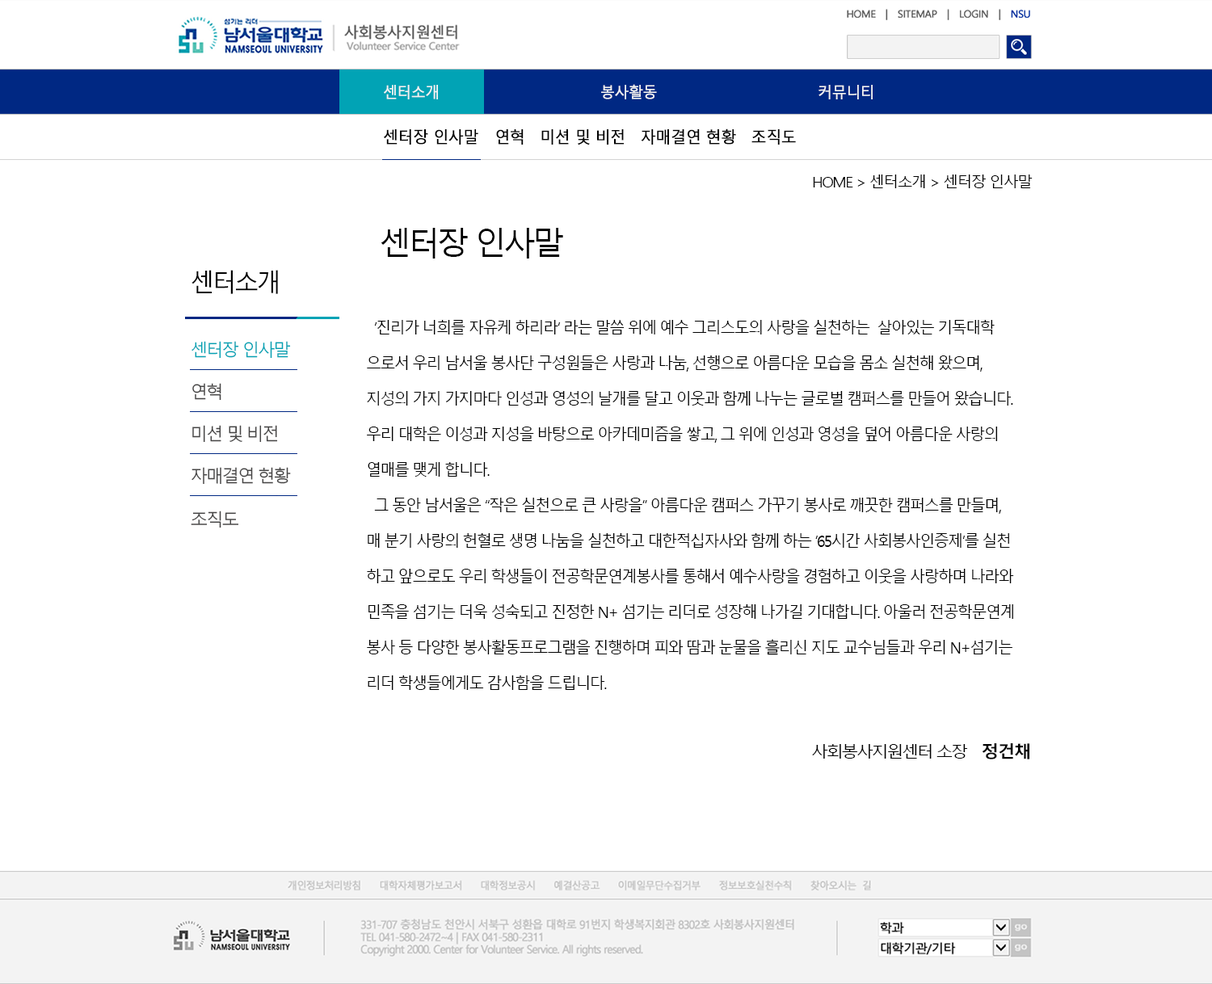
<style>
.page{position:relative;width:1212px;height:984px;background:#ffffff}
.page>*{position:absolute;margin:0}
.t1{font:15.1px "MalgunGothicRegular";letter-spacing:-0.05em;color:#f3f3f3;font-weight:bold;scale:0.95 1}
.t2{font:16.2px "MalgunGothicRegular";letter-spacing:-0.05em;color:#000000;font-weight:bold;scale:0.95 1}
.t3{font:14.9px "MalgunGothicRegular";letter-spacing:-0.1em;color:#000000;scale:1.05 1}
.t4{font:32.3px "MalgunGothicRegular";letter-spacing:-0.1em;color:#000000}
.t5{font:25.1px "MalgunGothicRegular";letter-spacing:-0.1em;color:#000000}
.t6{font:16.5px/35.5px "MalgunGothicRegular";letter-spacing:-0.1em;color:#000000;scale:0.95 1}
.t7{font:17.4px "MalgunGothicRegular";letter-spacing:-0.1em;color:#01a3b5}
.t8{font:17.4px "MalgunGothicRegular";letter-spacing:-0.1em;color:#454444}
.t9{font:16.5px "MalgunGothicRegular";letter-spacing:-0.1em;color:#000000}
.t10{font:17.1px "MalgunGothicBold";letter-spacing:-0.05em;color:#000000}
</style>
<div class="page">
<p class="t1" style="left:384px;top:84px;width:489px;height:15px">센터소개        봉사활동       커뮤니티</p>
<p class="t2" style="left:384px;top:128px;width:412px;height:17px">센터장 인사말  　연혁　미션 및 비전　자매결연 현황　조직도</p>
<p class="t3" style="left:813px;top:175px;width:219px;height:13px">HOME &gt; 센터소개 &gt; 센터장 인사말</p>
<p class="t4" style="left:381px;top:228px;width:182px;height:31px">센터장 인사말</p>
<p class="t5" style="left:191px;top:270px;width:87px;height:24px">센터소개</p>
<p class="t6" style="left:367px;top:320px;width:647px;height:370px">‘진리가 너희를 자유케 하리라’ 라는 말씀 위에 예수 그리스도의 사랑을 실천하는  살아있는 기독대학 <br>으로서 우리 남서울 봉사단 구성원들은 사랑과 나눔, 선행으로 아름다운 모습을 몸소 실천해 왔으며, <br>지성의 가지 가지마다 인성과 영성의 날개를 달고 이웃과 함께 나누는 글로벌 캠퍼스를 만들어 왔습니다. <br>우리 대학은 이성과 지성을 바탕으로 아카데미즘을 쌓고, 그 위에 인성과 영성을 덮어 아름다운 사랑의 <br>열매를 맺게 합니다. <br>  그 동안 남서울은 “작은 실천으로 큰 사랑을” 아름다운 캠퍼스 가꾸기 봉사로 깨끗한 캠퍼스를 만들며,<br>매 분기 사랑의 헌혈로 생명 나눔을 실천하고 대한적십자사와 함께 하는 ‘65시간 사회봉사인증제’를 실천<br>하고 앞으로도 우리 학생들이 전공학문연계봉사를 통해서 예수사랑을 경험하고 이웃을 사랑하며 나라와<br>민족을 섬기는 더욱 성숙되고 진정한 N+ 섬기는 리더로 성장해 나가길 기대합니다. 아울러 전공학문연계<br>봉사 등 다양한 봉사활동프로그램을 진행하며 피와 땀과 눈물을 흘리신 지도 교수님들과 우리 N+섬기는<br>리더 학생들에게도 감사함을 드립니다.</p>
<p class="t7" style="left:191px;top:341px;width:100px;height:18px">센터장 인사말</p>
<p class="t8" style="left:192px;top:383px;width:29px;height:18px">연혁</p>
<p class="t8" style="left:192px;top:425px;width:86px;height:18px">미션 및 비전</p>
<p class="t8" style="left:191px;top:467px;width:100px;height:17px">자매결연 현황</p>
<p class="t8" style="left:191px;top:511px;width:47px;height:17px">조직도</p>
<p class="t9" style="left:812px;top:743px;width:217px;height:16px">사회봉사지원센터 소장　<span class="t10">정건채</span></p>
</div>
